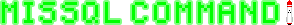
<style>
.page{position:relative;width:294px;height:25px;background:#7fff7f}
.page>*{position:absolute;margin:0}
.t1{font:24px "Minecraftia";letter-spacing:0.16em;color:#00ff00}
</style>
<div class="page">
<p class="t1" style="left:2px;top:2px;width:276px;height:21px">MISSQL COMMAND</p>
</div>
